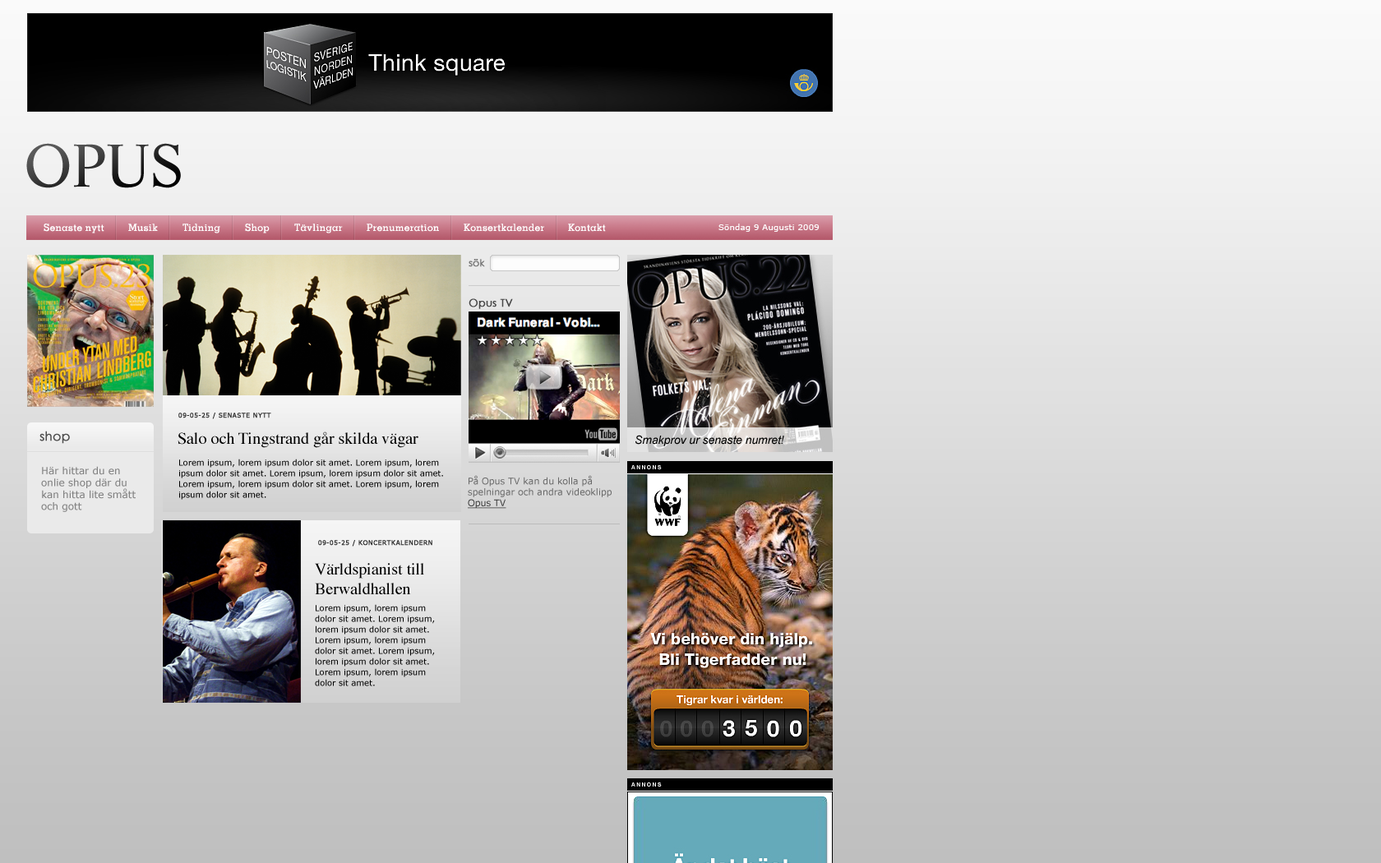
<style>
.page{position:relative;width:1381px;height:863px}
.page>*{position:absolute;margin:0}
.t1{font:59.2px "LifeLTStd-Roman"}
.t2{font:9.9px "MemphisLTStd-Medium";letter-spacing:0.025em;color:#ffffff}
.t3{font:8.2px "Verdana";letter-spacing:0.025em;color:#ffffff}
.t4{font:10.7px "CenturyGothic";color:#464646;font-weight:bold}
.t5{font:6.6px "Tahoma";letter-spacing:0.075em;color:#2e2e2e;font-weight:bold}
.t6{font:12.5px "CenturyGothic";color:#4e4e4e;font-weight:bold}
.t7{font:16.4px "Times-Roman";color:#000000}
.t8{font:8.2px/10.7px "Verdana";color:#000000}
.t9{font:9.9px "Verdana";color:#838383}
.t10{font:9px "Verdana";color:#686868}
.t11{font:9px "Verdana";color:#383838;text-decoration:underline}
</style>
<div class="page">
<p class="t1" style="left:26px;top:143px;width:155px;height:45px">OPUS</p>
<p class="t2" style="left:44px;top:224px;width:60px;height:9px">Senaste nytt</p>
<p class="t2" style="left:128px;top:224px;width:30px;height:8px">Musik</p>
<p class="t2" style="left:183px;top:224px;width:37px;height:9px">Tidning</p>
<p class="t2" style="left:245px;top:224px;width:25px;height:9px">Shop</p>
<p class="t2" style="left:294px;top:224px;width:49px;height:9px">Tävlingar</p>
<p class="t2" style="left:367px;top:224px;width:72px;height:8px">Prenumeration</p>
<p class="t2" style="left:464px;top:224px;width:80px;height:8px">Konsertkalender</p>
<p class="t2" style="left:568px;top:224px;width:38px;height:8px">Kontakt</p>
<p class="t3" style="left:719px;top:224px;width:101px;height:8px">Söndag 9 Augusti 2009</p>
<p class="t4" style="left:469px;top:298px;width:44px;height:11px">Opus TV</p>
<p class="t5" style="left:178px;top:413px;width:93px;height:6px">09-05-25 / SENASTE NYTT</p>
<p class="t6" style="left:39px;top:431px;width:31px;height:13px">shop</p>
<p class="t7" style="left:178px;top:432px;width:240px;height:16px">Salo och Tingstrand går skilda vägar</p>
<p class="t8" style="left:179px;top:459px;width:264px;height:41px">Lorem ipsum, lorem ipsum dolor sit amet. Lorem ipsum, lorem ipsum dolor sit amet. Lorem ipsum, lorem ipsum dolor sit amet. Lorem ipsum, lorem ipsum dolor sit amet. Lorem ipsum, lorem ipsum dolor sit amet.</p>
<p class="t9" style="left:41px;top:466px;width:95px;height:46px">Här hittar du en onlie shop där du kan hitta lite smått och gott</p>
<p class="t10" style="left:468px;top:475px;width:144px;height:34px">På Opus TV kan du kolla på spelningar och andra videoklipp<br><span class="t11">Opus TV</span></p>
<p class="t5" style="left:318px;top:540px;width:114px;height:7px">09-05-25 / KONCERTKALENDERN</p>
<p class="t7" style="left:315px;top:563px;width:109px;height:31px">Världspianist till<br>Berwaldhallen</p>
<p class="t8" style="left:315px;top:604px;width:120px;height:83px">Lorem ipsum, lorem ipsum dolor sit amet. Lorem ipsum, lorem ipsum dolor sit amet. Lorem ipsum, lorem ipsum dolor sit amet. Lorem ipsum, lorem ipsum dolor sit amet. Lorem ipsum, lorem ipsum dolor sit amet.</p>
</div>
